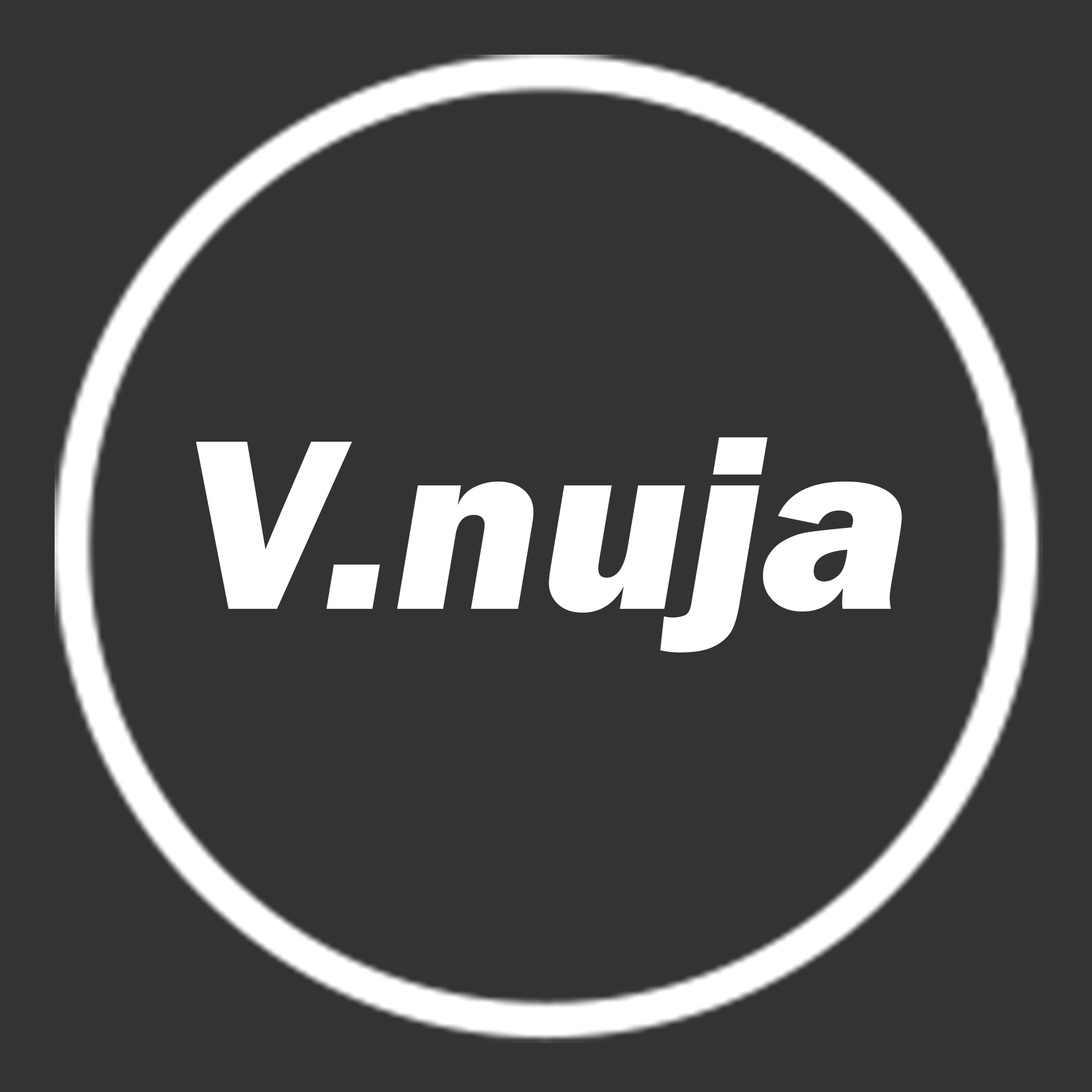
<style>
.page{position:relative;width:1092px;height:1092px;background:#333333}
.page>*{position:absolute;margin:0}
.t1{font:250.7px "FranklinGothic-HeavyItalic";color:#ffffff}
</style>
<div class="page">
<p class="t1" style="left:196px;top:437px;width:706px;height:215px">V.nuja</p>
</div>
